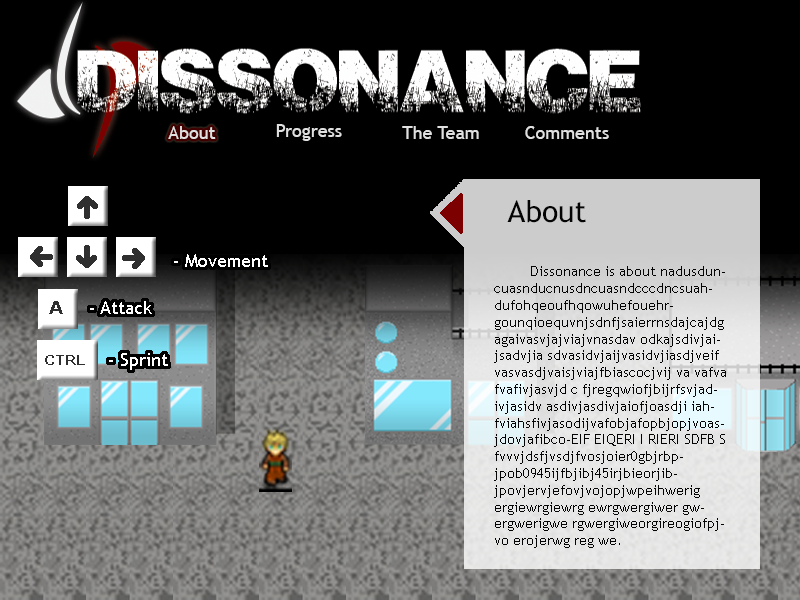
<style>
.page{position:relative;width:800px;height:600px;background:#000000}
.page>*{position:absolute;margin:0}
.t1{font:18px "TrebuchetMS";color:#e0e0e0}
.t2{font:30px "TrebuchetMS";color:#040404}
.t3{font:18px "TrebuchetMS";color:#ffffff}
.t4{font:14px "TrebuchetMS";color:#040404}
.t5{font:18px "Verdana-Bold";color:#302f2f}
.t6{font:14px "Verdana-Bold";color:#302f2f}
</style>
<div class="page">
<p class="t1" style="left:168px;top:126px;width:48px;height:13px">About</p>
<p class="t1" style="left:276px;top:124px;width:66px;height:17px">Progress</p>
<p class="t1" style="left:402px;top:126px;width:77px;height:13px">The Team</p>
<p class="t1" style="left:525px;top:126px;width:84px;height:13px">Comments</p>
<p class="t2" style="left:507px;top:200px;width:79px;height:23px">About</p>
<p class="t3" style="left:174px;top:254px;width:94px;height:13px">- Movement</p>
<p class="t4" style="left:494px;top:266px;width:232px;height:282px">Dissonance is about nadusduncuasnducnusdncuasndcccdncsuahdufohqeoufhqowuhefouehrgounqioequvnjsdnfjsaierrnsdajcajdgagaivasvjajviajvnasdav odkajsdivjaijsadvjia sdvasidvjaijvasidvjiasdjveif vasvasdjvaisjviajfbiascocjvij va vafva fvafivjasvjd c fjregqwiofjbijrfsvjadivjasidv asdivjasdivjaiofjoasdji iahfviahsfivjasodijvafobjafopbjopjvoasjdovjafibco-EIF EIQERI I RIERI SDFB S  fvvvjdsfjvsdjfvosjoier0gbjrbpjpob0945ijfbjibj45irjbieorjibjpovjervjefovjvojopjwpeihwerig ergiewrgiewrg ewrgwergiwer gwergwerigwe rgwergiweorgireogiofpjvo erojerwg reg we.</p>
<p class="t5" style="left:49px;top:301px;width:14px;height:13px">A</p>
<p class="t3" style="left:90px;top:301px;width:62px;height:13px">- Attack</p>
<p class="t3" style="left:109px;top:353px;width:59px;height:17px">- Sprint</p>
<p class="t6" style="left:45px;top:355px;width:40px;height:10px">CTRL</p>
</div>
